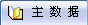
<style>
.page{position:relative;width:88px;height:25px}
.page>*{position:absolute;margin:0}
.t1{font:12px "SimSun";color:#000103}
</style>
<div class="page">
<p class="t1" style="left:32px;top:6px;width:47px;height:11px">主 数 据</p>
</div>
